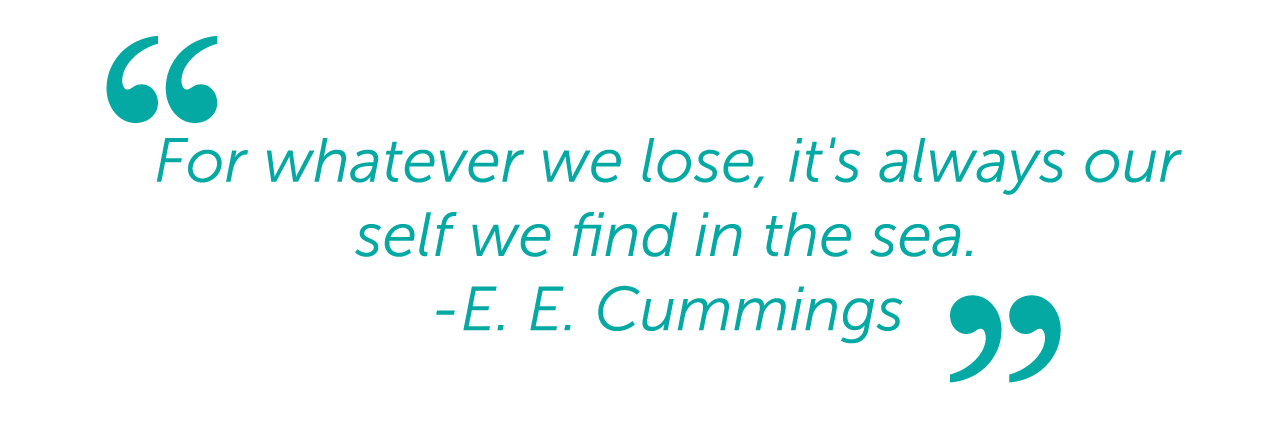
<style>
.page{position:relative;width:1267px;height:422px;background:#ffffff}
.page>*{position:absolute;margin:0}
.t1{font:319.3px "MyanmarMN";color:#05a9a3}
.t2{font:61.9px "MuseoSans-300Italic";color:#05a9a3}
</style>
<div class="page">
<p class="t1" style="left:106px;top:36px;width:112px;height:87px">“</p>
<p class="t2" style="left:156px;top:137px;width:1026px;height:207px;text-align:center">For whatever we lose, it's always our self we find in the sea.<br>-E. E. Cummings</p>
<p class="t1" style="left:950px;top:295px;width:111px;height:88px;rotate:-180deg">“</p>
</div>
